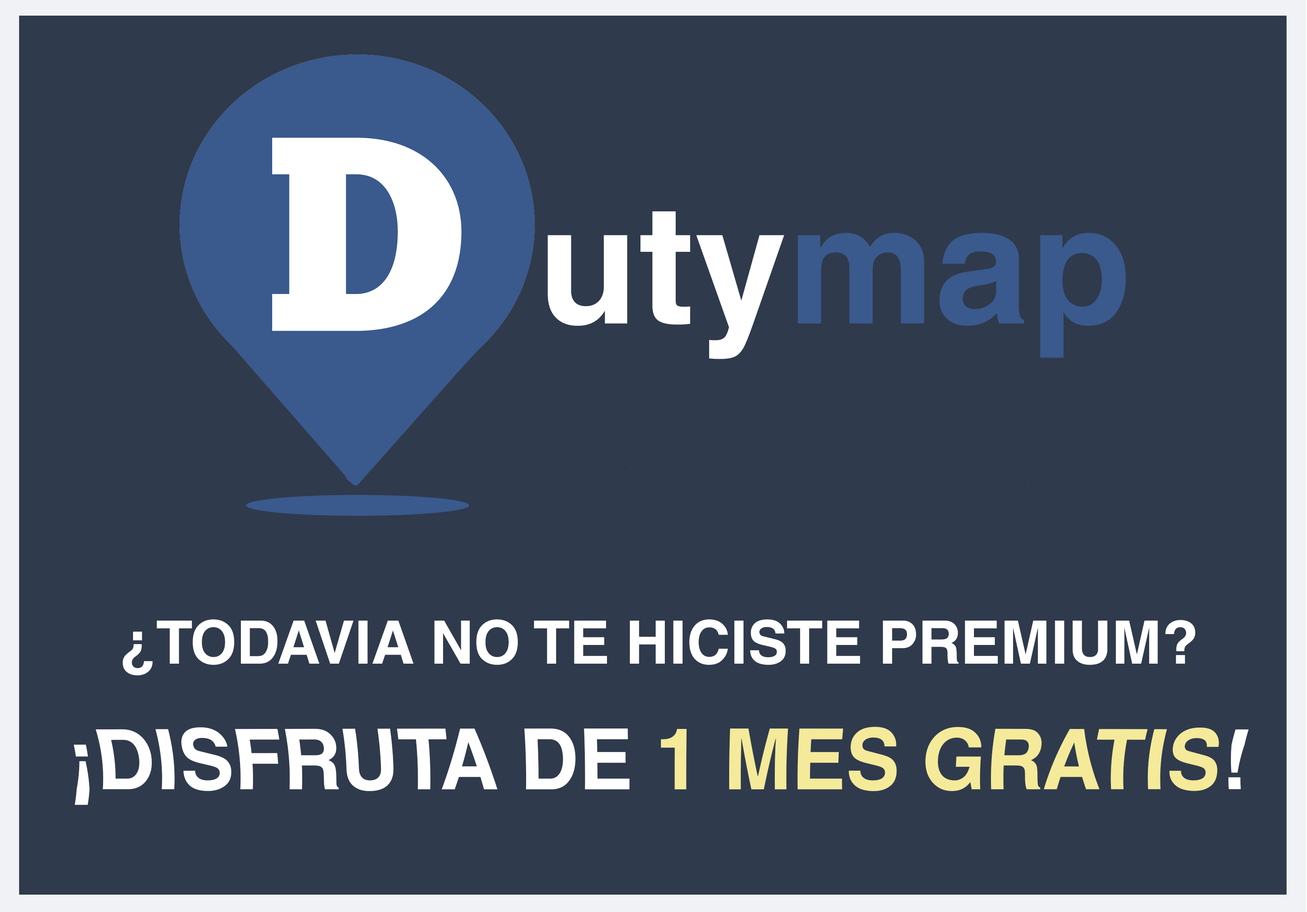
<style>
.page{position:relative;width:1307px;height:912px;background:#2f3a4c}
.page>*{position:absolute;margin:0}
.t1{font:59.8px "HelveticaWorld-Bold";color:#ffffff}
.t2{font:82.9px "HelveticaWorld-Bold";color:#ffffff}
.t3{font:82.9px "HelveticaWorld-Bold";color:#f4ea9a}
</style>
<div class="page">
<p class="t1" style="left:123px;top:619px;width:1073px;height:56px">¿TODAVIA NO TE HICISTE PREMIUM?</p>
<p class="t2" style="left:74px;top:727px;width:1175px;height:78px">¡DISFRUTA DE <span class="t3">1 MES GRATIS</span>!</p>
</div>
